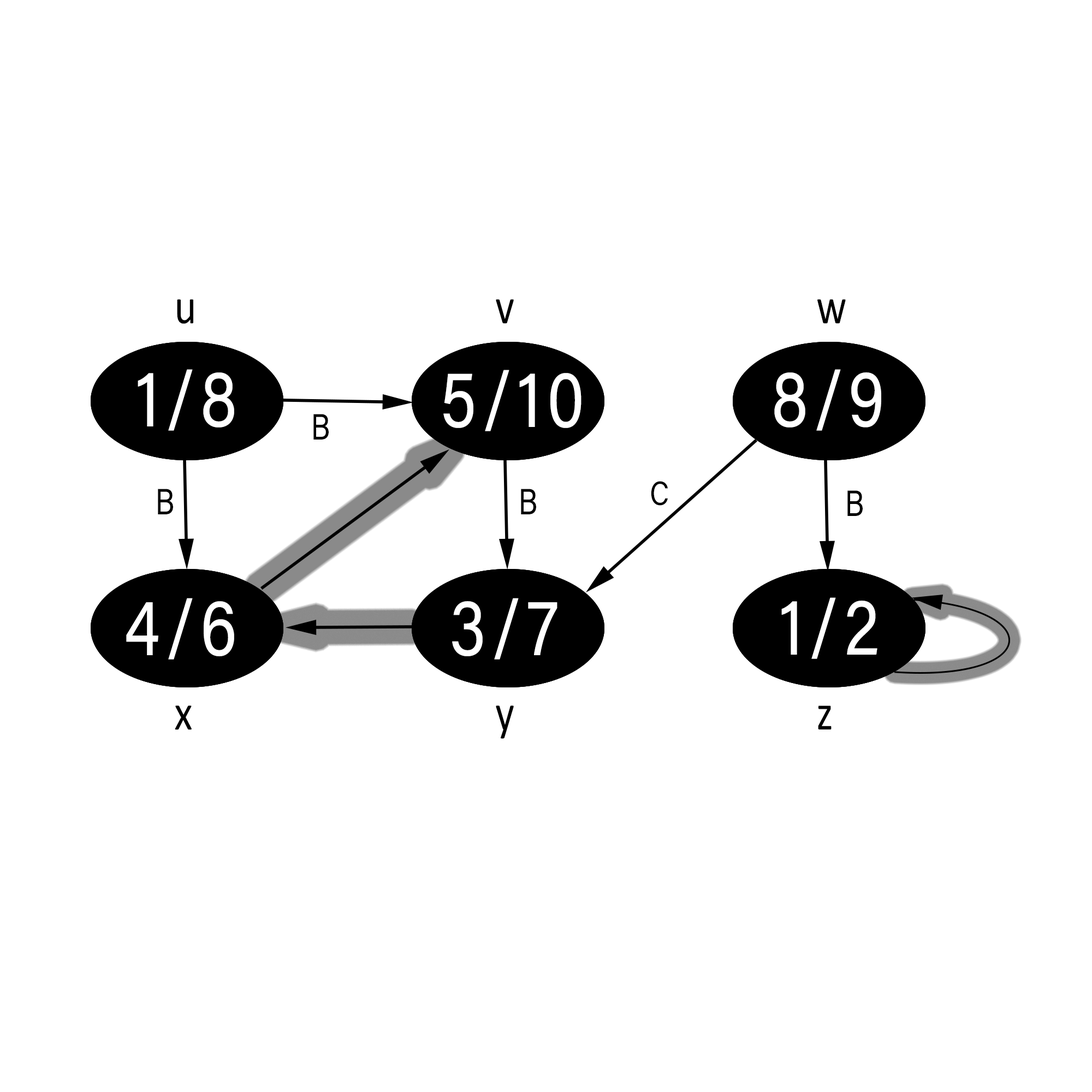
<style>
.page{position:relative;width:1092px;height:1092px;background:#ffffff}
.page>*{position:absolute;margin:0}
.t1{font:51.2px "Calibri";letter-spacing:0.08em;color:#000000;scale:0.83 1}
.t2{font:80.4px "AcuminPro-Regular";letter-spacing:0.08em;color:#ffffff;scale:0.83 1}
.t3{font:36.4px "AcuminPro-Regular";letter-spacing:0.08em;color:#000000;scale:0.83 1}
.t4{font:33.8px "AcuminPro-Regular";letter-spacing:0.08em;color:#000000;scale:0.83 1}
.t5{font:80.4px "AcuminPro-Regular";letter-spacing:0.08em;scale:0.83 1}
</style>
<div class="page">
<p class="t1" style="left:177px;top:299px;width:16px;height:25px">u</p>
<p class="t1" style="left:496px;top:299px;width:18px;height:25px">v</p>
<p class="t1" style="left:817px;top:299px;width:29px;height:25px">w</p>
<p class="t2" style="left:138px;top:369px;width:96px;height:62px">1/8</p>
<p class="t2" style="left:443px;top:370px;width:138px;height:61px">5/10</p>
<p class="t2" style="left:774px;top:369px;width:107px;height:62px">8/9</p>
<p class="t3" style="left:313px;top:414px;width:16px;height:26px">B</p>
<p class="t4" style="left:651px;top:481px;width:17px;height:25px">C</p>
<p class="t3" style="left:158px;top:489px;width:15px;height:25px">B</p>
<p class="t3" style="left:521px;top:489px;width:15px;height:25px">B</p>
<p class="t3" style="left:847px;top:490px;width:16px;height:26px">B</p>
<p class="t2" style="left:126px;top:598px;width:108px;height:62px">4/6</p>
<p class="t2" style="left:452px;top:600px;width:67px;height:61px">3/</p>
<p class="t2" style="left:452px;top:598px;width:105px;height:62px">3/7</p>
<p class="t5" style="left:779px;top:598px;width:54px;height:62px">1/</p>
<p class="t2" style="left:781px;top:597px;width:96px;height:62px">1/2</p>
<p class="t1" style="left:175px;top:705px;width:17px;height:25px">x</p>
<p class="t1" style="left:496px;top:705px;width:18px;height:34px">y</p>
<p class="t1" style="left:818px;top:705px;width:14px;height:24px">z</p>
</div>
